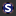
<style>
.page{position:relative;width:16px;height:16px;background:#333333}
.page>*{position:absolute;margin:0}
.t1{font:12px "ScalaSansPro-Bold";color:#ffffff}
</style>
<div class="page">
<p class="t1" style="left:4px;top:4px;width:7px;height:8px">S</p>
</div>
